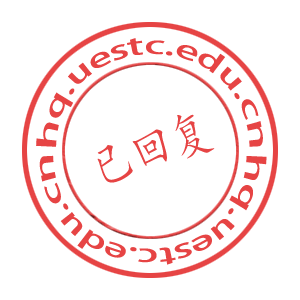
<style>
.page{position:relative;width:300px;height:300px;background:#ffffff}
.page>*{position:absolute;margin:0}
.t1{font:25px "AdobeHeitiStd-Regular";color:#e64444}
.t2{font:51.8px "KaiTi";color:#e64444;scale:0.79 1}
</style>
<div class="page">
<p class="t1" style="left:36px;top:38px;width:227px;height:109px">hq.uestc.edu.cn</p>
<p class="t2" style="left:97px;top:114px;width:118px;height:69px;rotate:-20deg">已回复</p>
<p class="t1" style="left:39px;top:155px;width:228px;height:110px;rotate:-180deg">hq.uestc.edu.cn</p>
</div>
